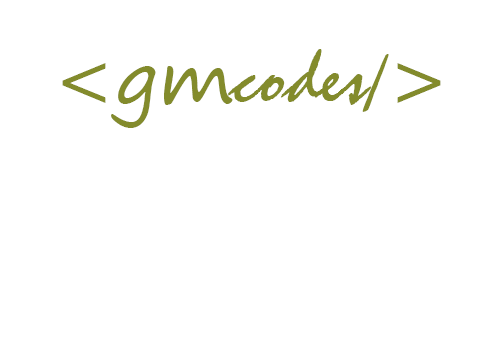
<style>
.page{position:relative;width:504px;height:360px;background:#ffffff}
.page>*{position:absolute;margin:0}
.t1{font:74.4px "Staccato222BT-Regular";color:#838b2c}
.t2{font:74.4px "SegoePrint";color:#838b2c}
</style>
<div class="page">
<p class="t1" style="left:62px;top:49px;width:379px;height:79px">&lt;<span class="t2">gm</span>codes/&gt;</p>
</div>
